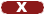
<style>
.page{position:relative;width:45px;height:15px;background:#8c1a1a}
.page>*{position:absolute;margin:0}
.t1{font:14px "Arial-Black";color:#ffffff}
</style>
<div class="page">
<p class="t1" style="left:16px;top:2px;width:11px;height:10px">X</p>
</div>
